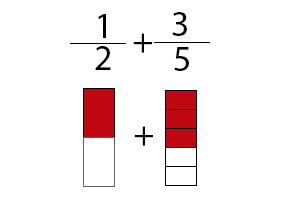
<style>
.page{position:relative;width:300px;height:200px;background:#ffffff}
.page>*{position:absolute;margin:0}
.t1{font:36px "MyriadPro-Regular";color:#000000}
</style>
<div class="page">
<p class="t1" style="left:98px;top:14px;width:8px;height:24px">1</p>
<p class="t1" style="left:172px;top:12px;width:15px;height:24px">3</p>
<p class="t1" style="left:133px;top:33px;width:19px;height:20px">+</p>
<p class="t1" style="left:95px;top:46px;width:16px;height:24px">2</p>
<p class="t1" style="left:174px;top:47px;width:15px;height:24px">5</p>
<p class="t1" style="left:134px;top:126px;width:19px;height:20px">+</p>
</div>
